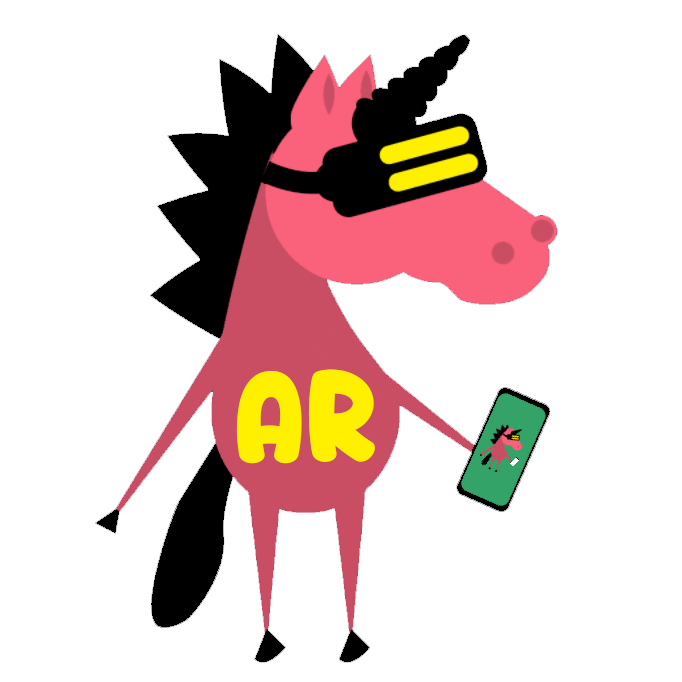
<style>
.page{position:relative;width:682px;height:682px;background:#ffffff}
.page>*{position:absolute;margin:0}
.t1{font:132.3px "VinegarStroke";color:#fff000}
</style>
<div class="page">
<p class="t1" style="left:236px;top:369px;width:139px;height:95px">ar</p>
</div>
